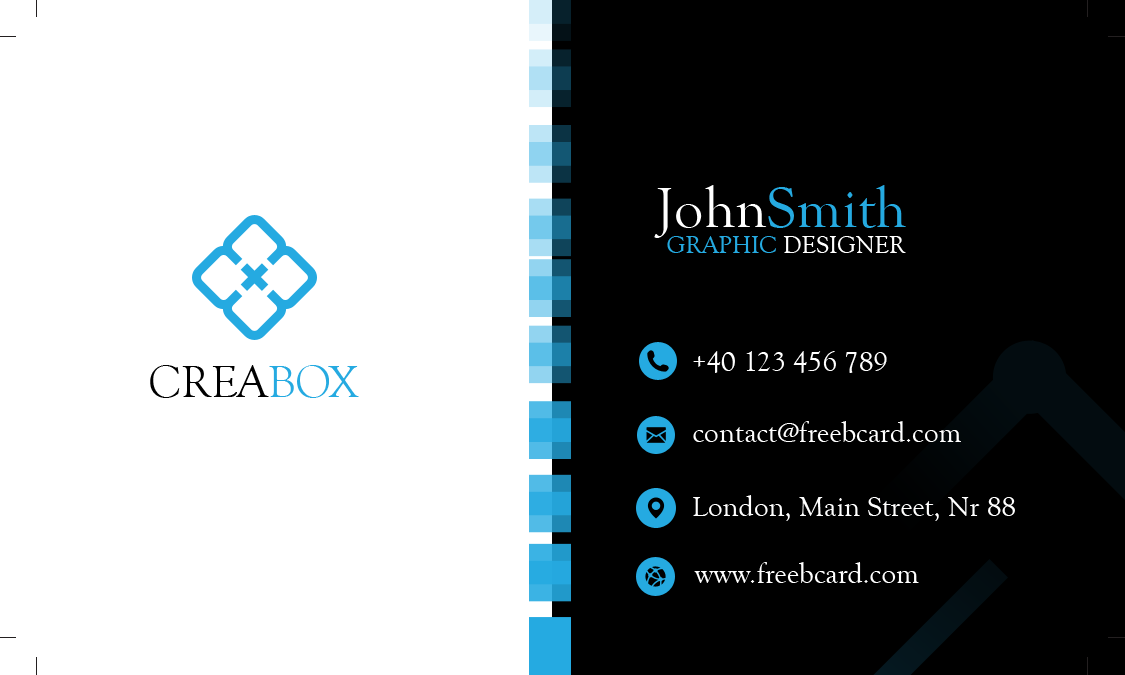
<style>
.page{position:relative;width:1125px;height:675px;background:#ffffff}
.page>*{position:absolute;margin:0}
.t1{font:58.3px "GoudyOldStyleT-Regular";color:#25aae1}
.t2{font:58.3px "GoudyOldStyleT-Regular";color:#ffffff}
.t3{font:25px "GoudyOldStyleT-Regular";color:#ffffff}
.t4{font:25px "GoudyOldStyleT-Regular";color:#25aae1}
.t5{font:29.2px "GoudyOldStyleT-Regular";color:#ffffff}
.t6{font:45.8px "GoudyOldStyleT-Regular";color:#000000}
.t7{font:45.8px "GoudyOldStyleT-Regular";color:#25aae1}
</style>
<div class="page">
<p class="t1" style="left:654px;top:185px;width:252px;height:53px"><span class="t2">John</span>Smith</p>
<p class="t3" style="left:667px;top:236px;width:239px;height:17px"><span class="t4">GRAPHIC</span> DESIGNER</p>
<p class="t5" style="left:693px;top:351px;width:194px;height:22px">+40 123 456 789</p>
<p class="t6" style="left:150px;top:365px;width:209px;height:33px">CREA<span class="t7">BOX</span></p>
<p class="t5" style="left:693px;top:421px;width:268px;height:21px">contact@freebcard.com</p>
<p class="t5" style="left:693px;top:495px;width:322px;height:26px">London, Main Street, Nr 88</p>
<p class="t5" style="left:694px;top:562px;width:225px;height:21px">www.freebcard.com</p>
</div>
